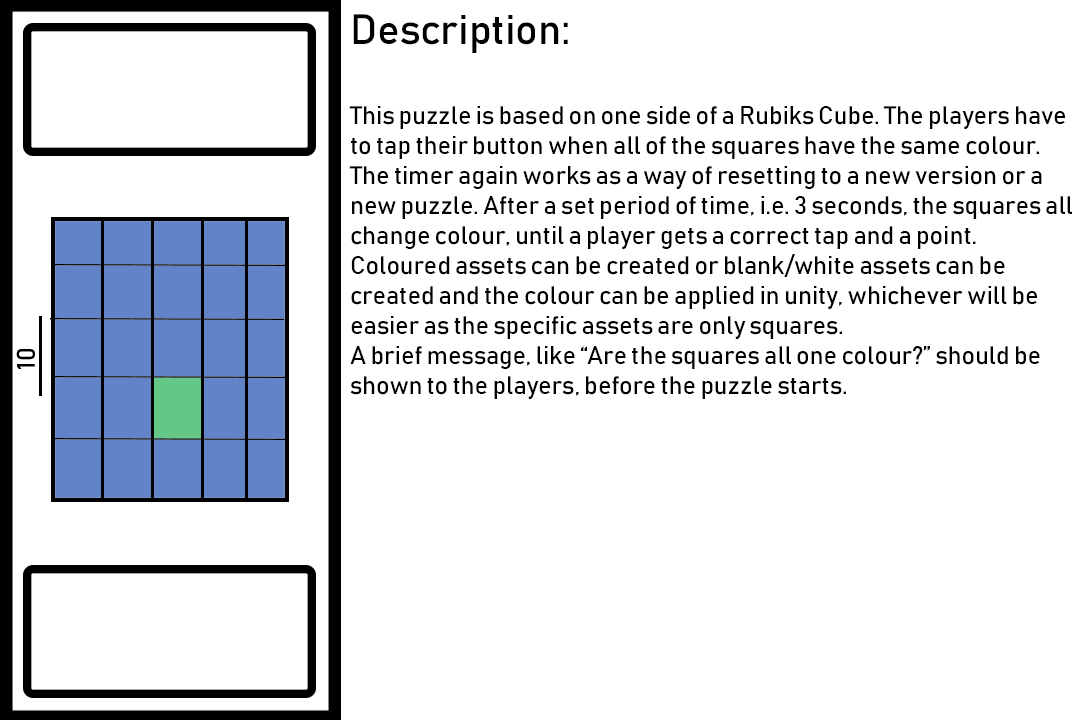
<style>
.page{position:relative;width:1080px;height:720px;background:#ffffff}
.page>*{position:absolute;margin:0}
.t1{font:25px "Bahnschrift";color:#000000}
.t2{font:41.7px "Bahnschrift";color:#000000}
</style>
<div class="page">
<p class="t1" style="left:349px;top:14px;width:723px;height:385px"><span class="t2">Description:<br><br></span>This puzzle is based on one side of a Rubiks Cube. The players have<br>to tap their button when all of the squares have the same colour.<br>The timer again works as a way of resetting to a new version or a<br>new puzzle. After a set period of time, i.e. 3 seconds, the squares all<br>change colour, until a player gets a correct tap and a point.<br>Coloured assets can be created or blank/white assets can be<br>created and the colour can be applied in unity, whichever will be<br>easier as the specific assets are only squares.<br>A brief message, like “Are the squares all one colour?” should be<br>shown to the players, before the puzzle starts.</p>
</div>
